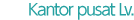
<style>
.page{position:relative;width:134px;height:20px;background:#ffffff}
.page>*{position:absolute;margin:0}
.t1{font:16px "UDShinGoPro-Regular";letter-spacing:-0.08em;color:#26a1a1}
</style>
<div class="page">
<p class="t1" style="left:29px;top:3px;width:105px;height:17px">Kantor pusat Lv.</p>
</div>
